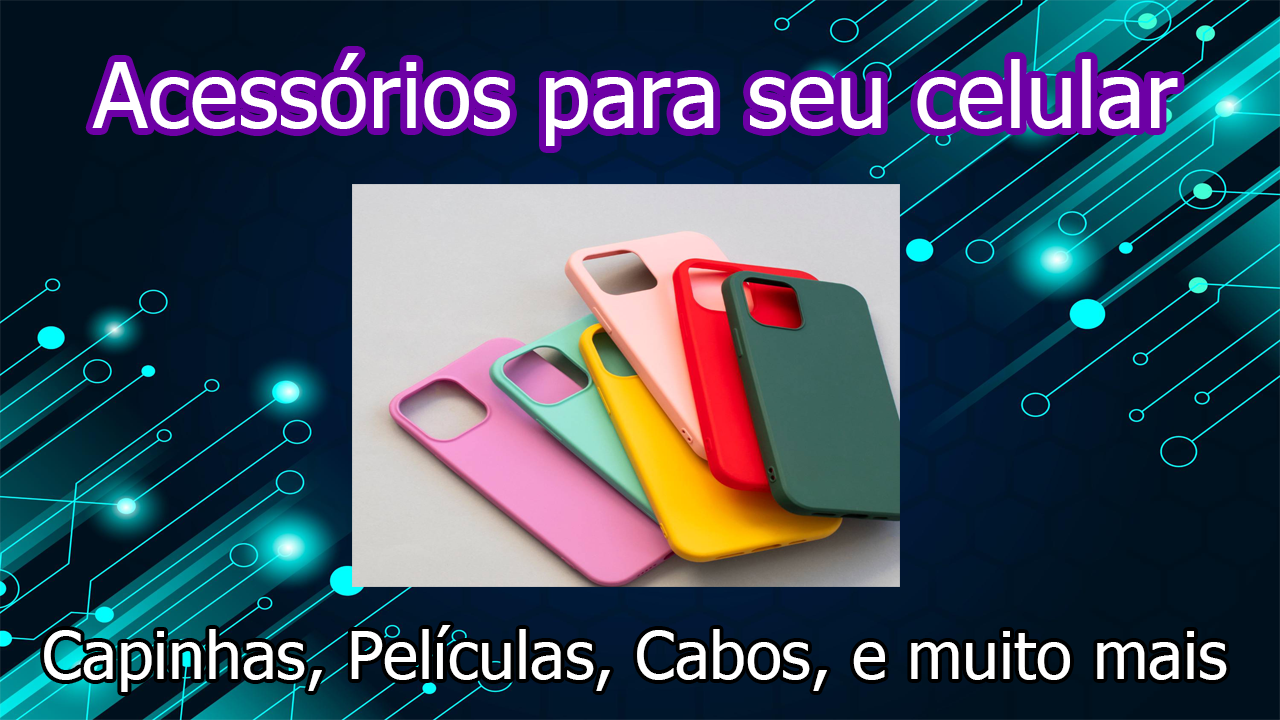
<style>
.page{position:relative;width:1280px;height:720px}
.page>*{position:absolute;margin:0}
.t1{font:91px "Tahoma";color:#ffffff}
.t2{font:66px "Tahoma";color:#ffffff}
</style>
<div class="page">
<p class="t1" style="left:92px;top:53px;width:1086px;height:93px">Acessórios para seu celular</p>
<p class="t2" style="left:44px;top:625px;width:1183px;height:67px">Capinhas, Películas, Cabos, e muito mais</p>
</div>
